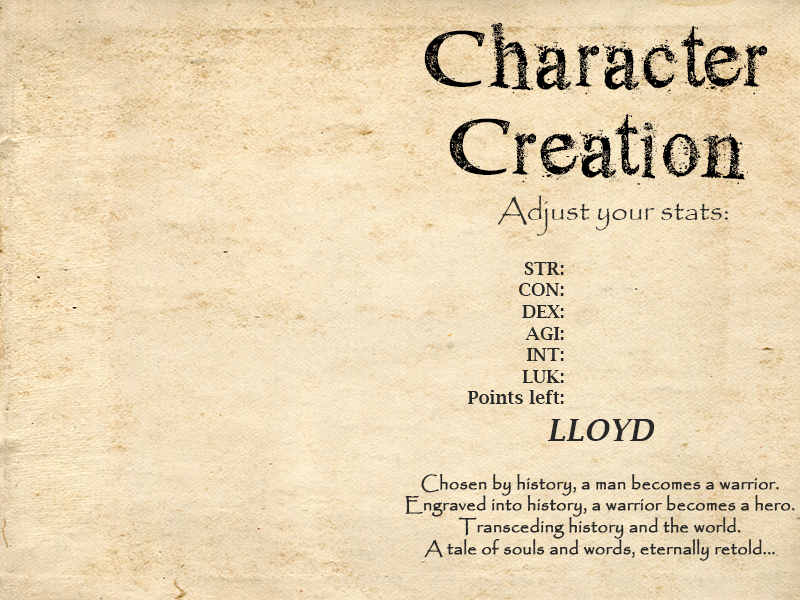
<style>
.page{position:relative;width:800px;height:600px}
.page>*{position:absolute;margin:0}
.t1{font:30px "Papyrus-Regular";color:#282828}
.t2{font:18px "LucidaBright-Demi";color:#282828}
.t3{font:30px "LucidaBright-DemiItalic";color:#282828}
.t4{font:18px "Papyrus-Regular";color:#282828;font-weight:bold}
</style>
<div class="page">
<p class="t1" style="left:497px;top:195px;width:231px;height:41px">Adjust your stats:</p>
<p class="t2" style="left:467px;top:262px;width:97px;height:142px;text-align:right">STR:<br>CON:<br>DEX:<br>AGI:<br>INT:<br>LUK:<br>Points left:</p>
<p class="t3" style="left:547px;top:419px;width:108px;height:22px">LLOYD</p>
<p class="t4" style="left:405px;top:474px;width:390px;height:87px;text-align:center">Chosen by history, a man becomes a warrior.    Engraved into history, a warrior becomes a hero.<br>Transceding history and the world.<br>A tale of souls and words, eternally retold...</p>
</div>
